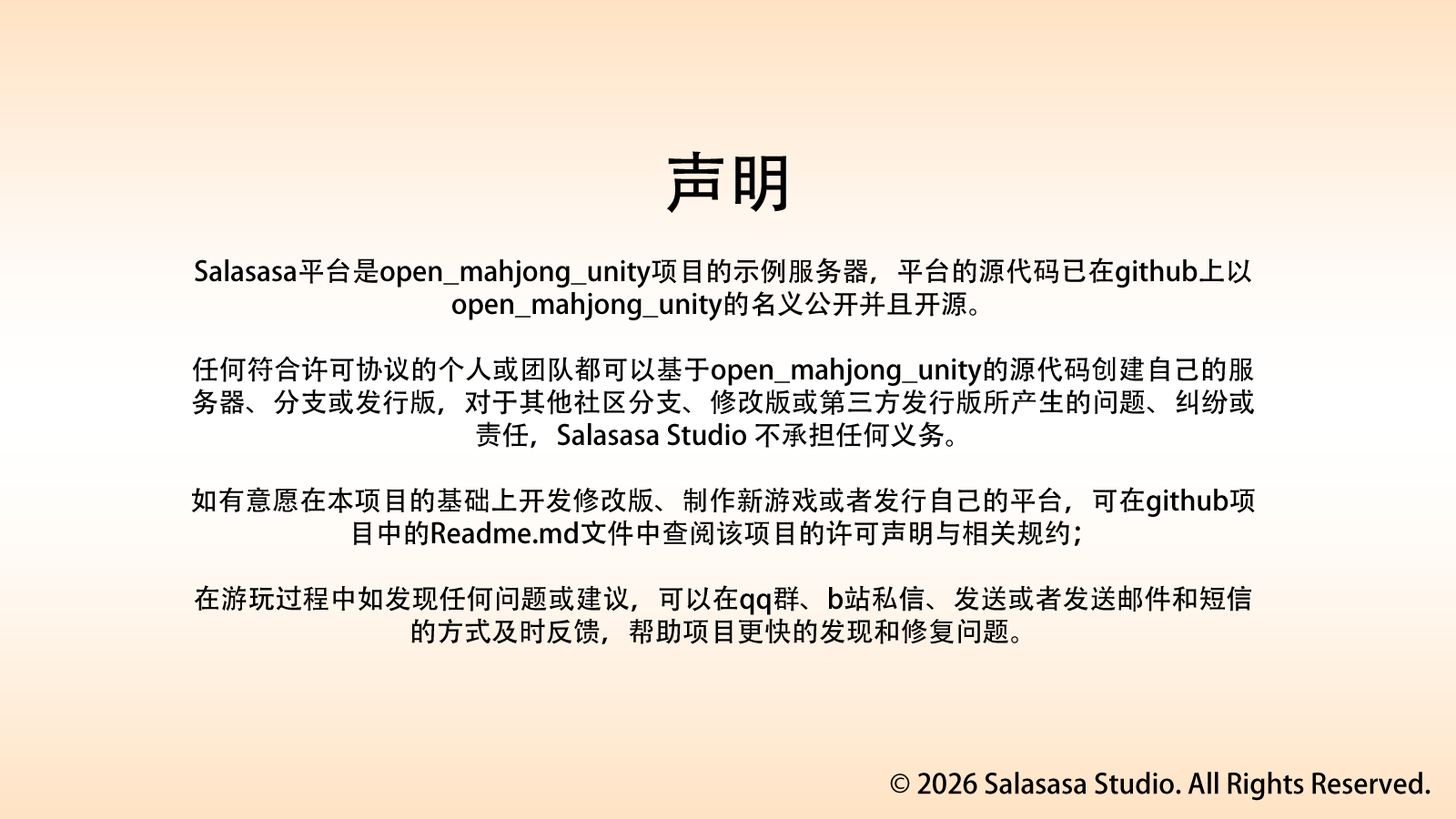
<style>
.page{position:relative;width:1456px;height:819px}
.page>*{position:absolute;margin:0}
.t1{font:65.5px "AdobeHeitiStd-Regular";color:#000000}
.t2{font:27.3px "AdobeHeitiStd-Regular";color:#000000}
</style>
<div class="page">
<p class="t1" style="left:667px;top:151px;width:120px;height:62px">声明</p>
<p class="t2" style="left:191px;top:258px;width:1064px;height:386px;text-align:center">Salasasa平台是open_mahjong_unity项目的示例服务器，平台的源代码已在github上以open_mahjong_unity的名义公开并且开源。<br><br>任何符合许可协议的个人或团队都可以基于open_mahjong_unity的源代码创建自己的服务器、分支或发行版，对于其他社区分支、修改版或第三方发行版所产生的问题、纠纷或责任，Salasasa Studio 不承担任何义务。<br><br>如有意愿在本项目的基础上开发修改版、制作新游戏或者发行自己的平台，可在github项目中的Readme.md文件中查阅该项目的许可声明与相关规约；<br><br>在游玩过程中如发现任何问题或建议，可以在qq群、b站私信、发送或者发送邮件和短信的方式及时反馈，帮助项目更快的发现和修复问题。</p>
<p class="t2" style="left:890px;top:772px;width:541px;height:29px">© 2026 Salasasa Studio. All Rights Reserved.</p>
</div>
